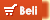
<style>
.page{position:relative;width:50px;height:20px}
.page>*{position:absolute;margin:0}
.t1{font:11.3px "CenturyGothic-Bold";color:#fefcfc;scale:0.93 1}
.t2{font:11.3px "CenturyGothic-Bold";color:#f8f8f6;scale:0.93 1}
</style>
<div class="page">
<p class="t1" style="left:20px;top:6px;width:17px;height:9px">Beli</p>
<p class="t2" style="left:20px;top:6px;width:17px;height:9px">Beli</p>
</div>
